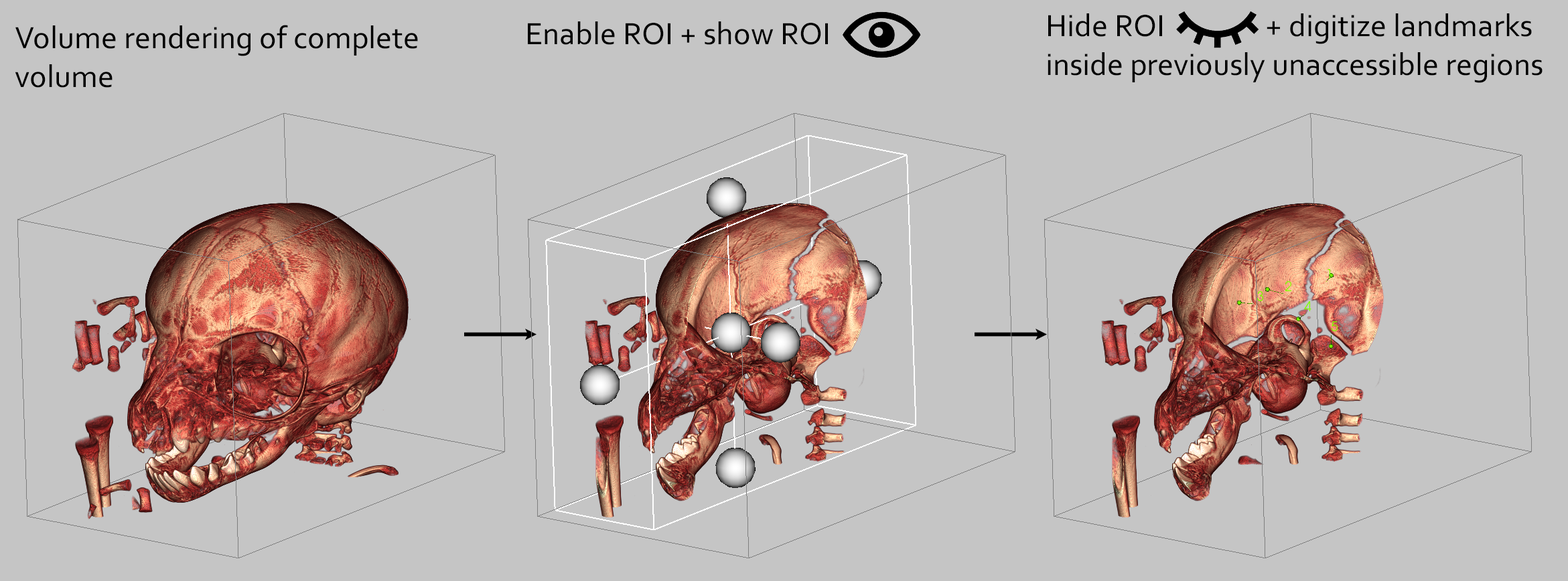
<style>
.page{position:relative;width:1568px;height:581px;background:#c5c5c5}
.page>*{position:absolute;margin:0}
.t1{font:32.2px "Corbel";color:#000000}
</style>
<div class="page">
<p class="t1" style="left:1048px;top:13px;width:495px;height:70px">Hide ROI               + digitize landmarks <br>inside previously unaccessible regions</p>
<p class="t1" style="left:15px;top:25px;width:403px;height:63px">Volume rendering of complete<br>volume</p>
<p class="t1" style="left:528px;top:21px;width:300px;height:24px">Enable ROI + show ROI</p>
</div>
